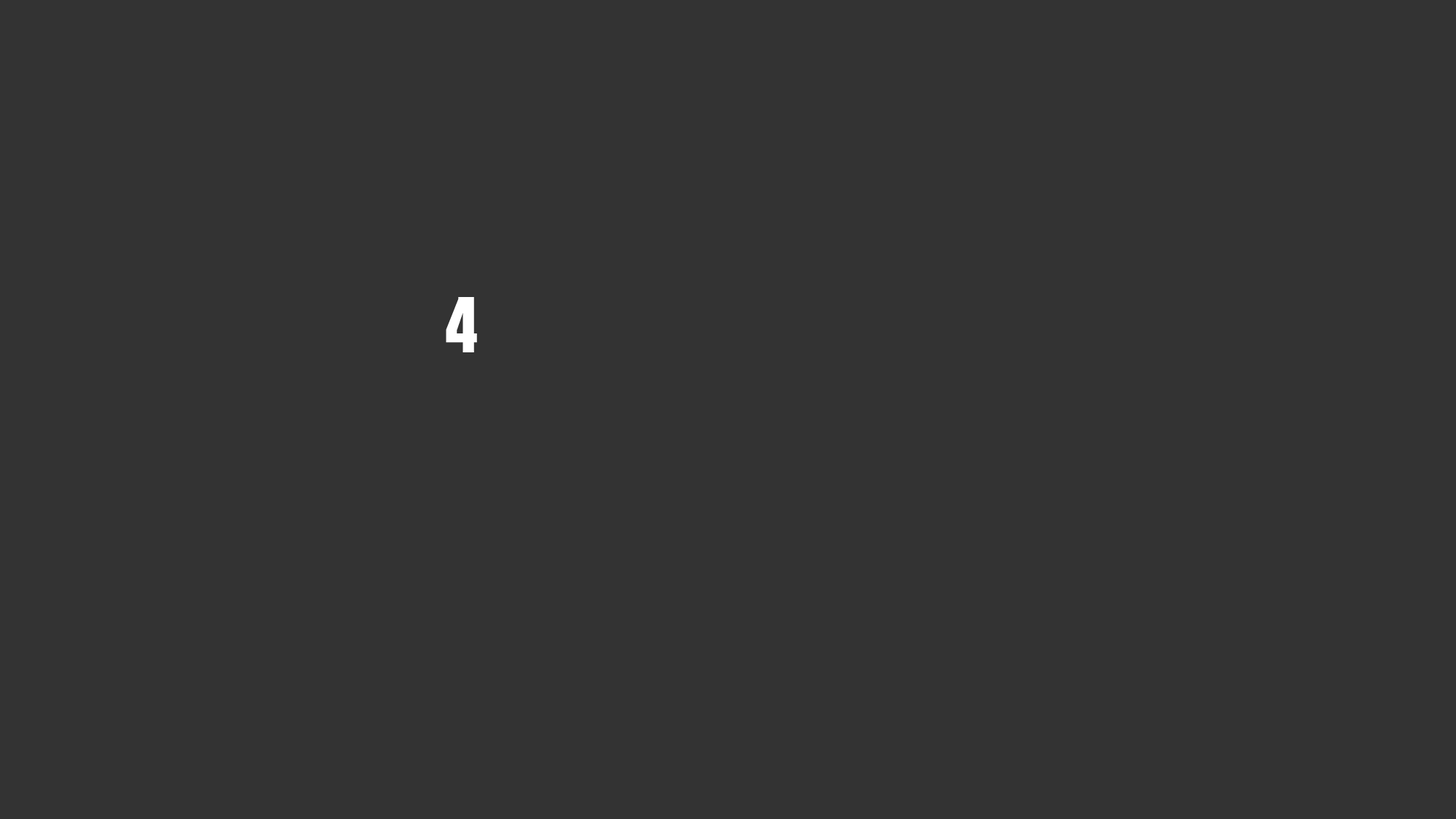
<style>
.page{position:relative;width:1456px;height:819px;background:#333333}
.page>*{position:absolute;margin:0}
.t1{font:75.9px "AmericanCaptain";color:#ffffff}
</style>
<div class="page">
<p class="t1" style="left:446px;top:297px;width:31px;height:55px">4</p>
</div>
